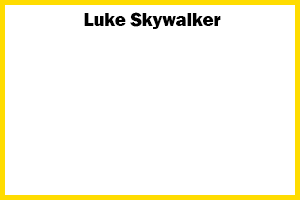
<style>
.page{position:relative;width:300px;height:200px;background:#ffffff}
.page>*{position:absolute;margin:0}
.t1{font:18.7px "FranklinGothic-Heavy";color:#000000}
</style>
<div class="page">
<p class="t1" style="left:84px;top:12px;width:137px;height:17px">Luke Skywalker</p>
</div>
